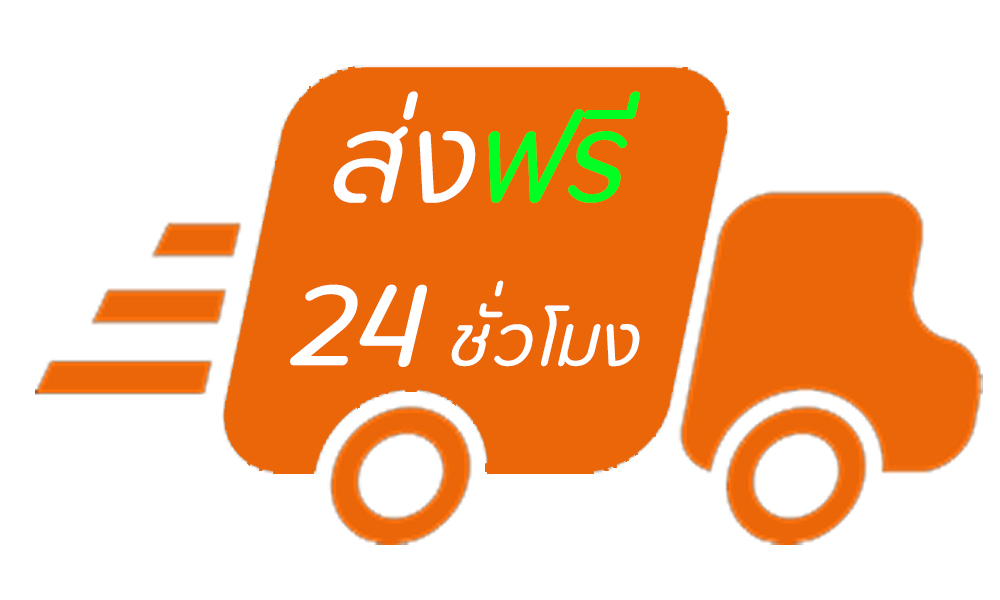
<style>
.page{position:relative;width:1000px;height:600px;background:#ffffff}
.page>*{position:absolute;margin:0}
.t1{font:103.7px "Opun-Regular";color:#ffffff;font-weight:bold;scale:0.97 1}
.t2{font:103.7px "Opun-Regular";color:#00ff22;font-weight:bold;scale:0.97 1}
.t3{font:60.5px "Opun-Regular";color:#ffffff;font-weight:bold;scale:0.97 1}
.t4{font:103.1px "Opun-Regular";color:#ffffff;font-weight:bold;scale:0.97 1}
</style>
<div class="page">
<p class="t1" style="left:333px;top:91px;width:307px;height:112px">ส่ง<span class="t2">ฟรี</span></p>
<p class="t3" style="left:290px;top:280px;width:350px;height:87px"><span class="t4">24 </span>ชั่วโมง</p>
</div>
